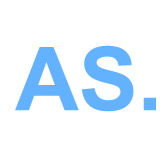
<style>
.page{position:relative;width:160px;height:160px;background:#ffffff}
.page>*{position:absolute;margin:0}
.t1{font:88px "Arial-BoldMT";color:#63b2ff}
</style>
<div class="page">
<p class="t1" style="left:15px;top:45px;width:141px;height:67px">AS.</p>
</div>
